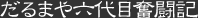
<style>
.page{position:relative;width:198px;height:18px;background:#333333}
.page>*{position:absolute;margin:0}
.t1{font:24px "DFLeiSho-SB-MP-RKSJ-H";letter-spacing:-0.1em;color:#ffffff}
.t2{font:24px "DFLeiSho-SB-MP-RKSJ-H";letter-spacing:-0.2em;color:#ffffff}
.t3{font:24px "DFLeiSho-SB-MP-RKSJ-H";letter-spacing:-0.3em;color:#ffffff}
.t4{font:24px "DFLeiSho-SB-MP-RKSJ-H";letter-spacing:-0.25em;color:#ffffff}
.t5{font:24px "DFLeiSho-SB-MP-RKSJ-H";letter-spacing:-0.15em;color:#ffffff}
</style>
<div class="page">
<p class="t1" style="left:0px;top:0px;width:198px;height:18px"><span class="t2">だ</span><span class="t3">る</span><span class="t4">ま</span><span class="t5">や</span>六<span class="t2">代目</span>奮闘記</p>
</div>
